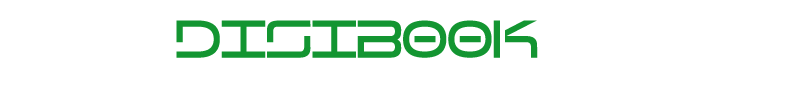
<style>
.page{position:relative;width:800px;height:100px;background:#ffffff}
.page>*{position:absolute;margin:0}
.t1{font:48px "Tele-Marines";letter-spacing:-0.06em;color:#139531}
</style>
<div class="page">
<p class="t1" style="left:176px;top:20px;width:362px;height:38px">DISIBOOK</p>
</div>
